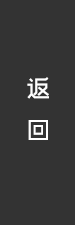
<style>
.page{position:relative;width:75px;height:225px;background:#333333}
.page>*{position:absolute;margin:0}
.t1{font:24px "RTWSShangGoG0v1-Regular";letter-spacing:0.022em;color:#ffffff}
</style>
<div class="page">
<p class="t1" style="left:27px;top:77px;width:22px;height:63px;text-align:center">返<br>回</p>
</div>
